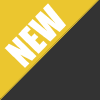
<style>
.page{position:relative;width:100px;height:100px;background:#333333}
.page>*{position:absolute;margin:0}
.t1{font:36px "Impact";color:#ffffff}
</style>
<div class="page">
<p class="t1" style="left:4px;top:3px;width:62px;height:65px;rotate:-46deg">NEW</p>
</div>
